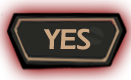
<style>
.page{position:relative;width:131px;height:80px}
.page>*{position:absolute;margin:0}
.t1{font:30px "037-CAI978";color:#cba783}
</style>
<div class="page">
<p class="t1" style="left:43px;top:28px;width:48px;height:22px">YES</p>
</div>
